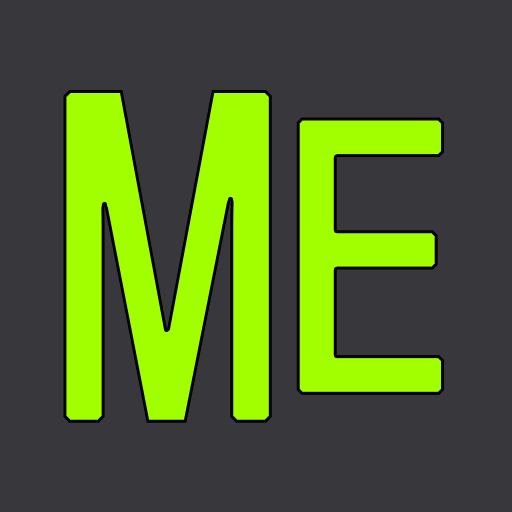
<style>
.page{position:relative;width:512px;height:512px;background:#38383c}
.page>*{position:absolute;margin:0}
.t1{font:450px "NotoMono";color:#a2ff00;font-weight:bold;scale:0.89 1}
.t2{font:375px "NotoMono";color:#a2ff00;font-weight:bold;scale:0.89 1}
</style>
<div class="page">
<p class="t1" style="left:63px;top:90px;width:209px;height:333px">M</p>
<p class="t2" style="left:296px;top:117px;width:149px;height:278px">E</p>
</div>
